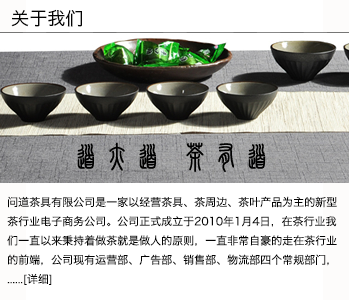
<style>
.page{position:relative;width:349px;height:300px;background:#ffffff}
.page>*{position:absolute;margin:0}
.t1{font:18px "HiraginoSansGB-W3";color:#040404}
.t2{font:11px "HiraginoSansGB-W3";color:#040404}
</style>
<div class="page">
<p class="t1" style="left:11px;top:9px;width:71px;height:18px">关于我们</p>
<p class="t2" style="left:7px;top:196px;width:330px;height:89px">问道茶具有限公司是一家以经营茶具、茶周边、茶叶产品为主的新型<br>茶行业电子商务公司。公司正式成立于2010年1月4日，在茶行业我<br>们一直以来秉持着做茶就是做人的原则，一直非常自豪的走在茶行业<br>的前端，公司现有运营部、广告部、销售部、物流部四个常规部门，<br>......[详细]</p>
</div>
